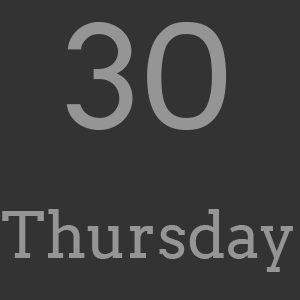
<style>
.page{position:relative;width:300px;height:300px;background:#333333}
.page>*{position:absolute;margin:0}
.t1{font:142.1px "Arvo";color:#959595}
.t2{font:62.5px "Arvo";color:#959595}
</style>
<div class="page">
<p class="t1" style="left:66px;top:22px;width:161px;height:108px">30</p>
<p class="t2" style="left:2px;top:209px;width:291px;height:63px">Thursday</p>
</div>
